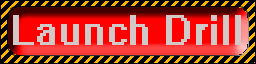
<style>
.page{position:relative;width:256px;height:64px}
.page>*{position:absolute;margin:0}
.t1{font:36px "System";color:#d2c8c8}
</style>
<div class="page">
<p class="t1" style="left:13px;top:15px;width:228px;height:30px">Launch Drill</p>
</div>
